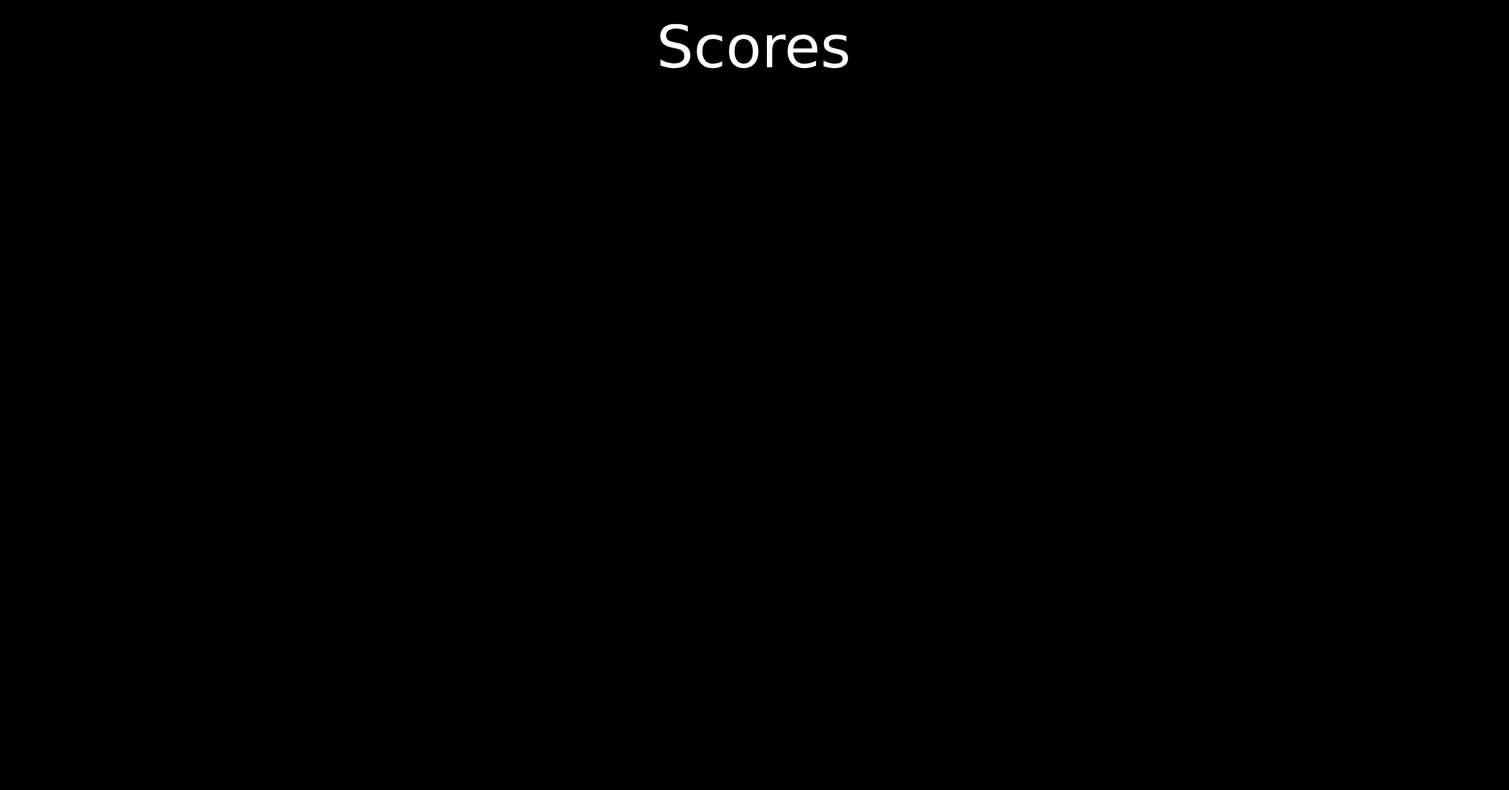
<style>
.page{position:relative;width:1509px;height:790px;background:#000000}
.page>*{position:absolute;margin:0}
.t1{font:58.5px "DejaVuSans";color:#ffffff}
</style>
<div class="page">
<p class="t1" style="left:660px;top:23px;width:188px;height:46px">Scores</p>
</div>
